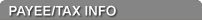
<style>
.page{position:relative;width:202px;height:20px;background:#858585}
.page>*{position:absolute;margin:0}
.t1{font:13.3px "Arial-BoldMT";color:#ffffff}
</style>
<div class="page">
<p class="t1" style="left:9px;top:5px;width:107px;height:11px">PAYEE/TAX INFO</p>
</div>
